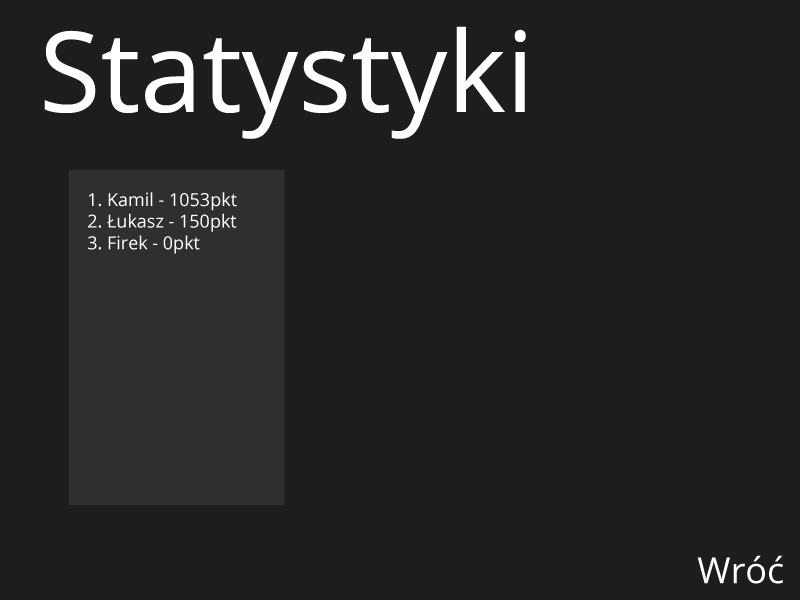
<style>
.page{position:relative;width:800px;height:600px;background:#1d1d1d}
.page>*{position:absolute;margin:0}
.t1{font:111.8px "OpenSans";color:#ffffff}
.t2{font:18px "OpenSans";color:#ffffff}
.t3{font:36px "OpenSans";color:#ffffff}
</style>
<div class="page">
<p class="t1" style="left:44px;top:26px;width:482px;height:113px">Statystyki</p>
<p class="t2" style="left:88px;top:192px;width:149px;height:62px">1. Kamil - 1053pkt<br>2. Łukasz - 150pkt<br>3. Firek - 0pkt</p>
<p class="t3" style="left:697px;top:555px;width:86px;height:29px">Wróć</p>
</div>
